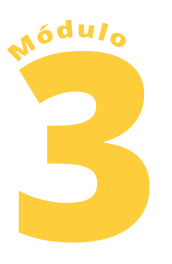
<style>
.page{position:relative;width:172px;height:264px;background:#ffffff}
.page>*{position:absolute;margin:0}
.t1{font:22.8px "OpenSans-Extrabold";letter-spacing:0.1em;color:#fdcd3b}
.t2{font:261.1px "OpenSans-Extrabold";color:#fdcd3b}
</style>
<div class="page">
<p class="t1" style="left:6px;top:19px;width:120px;height:43px;rotate:-6deg">Módulo</p>
<p class="t2" style="left:18px;top:51px;width:132px;height:192px">3</p>
</div>
